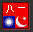
<style>
.page{position:relative;width:33px;height:32px;background:#f20000}
.page>*{position:absolute;margin:0}
.t1{font:10.4px "SimSun";color:#ffffff}
</style>
<div class="page">
<p class="t1" style="left:6px;top:5px;width:19px;height:8px">八一</p>
</div>
